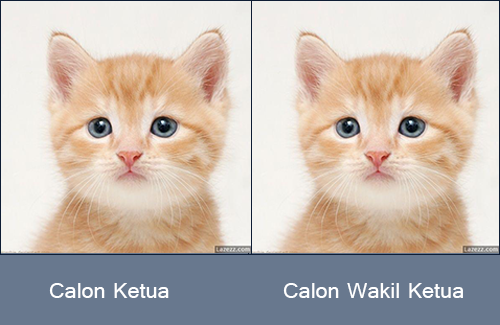
<style>
.page{position:relative;width:500px;height:325px;background:#68788e}
.page>*{position:absolute;margin:0}
.t1{font:24px "Raavi";color:#ffffff}
</style>
<div class="page">
<p class="t1" style="left:49px;top:283px;width:120px;height:15px">Calon Ketua</p>
<p class="t1" style="left:283px;top:283px;width:180px;height:15px">Calon Wakil Ketua</p>
</div>
